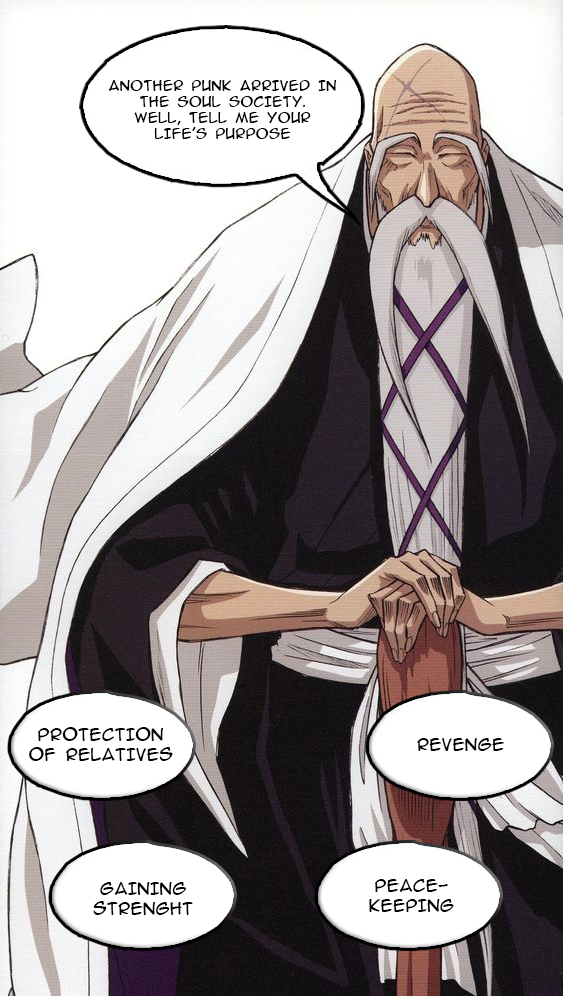
<style>
.page{position:relative;width:567px;height:997px;background:#ffffff}
.page>*{position:absolute;margin:0}
.t1{font:13.3px "AnimeAcev05";color:#000000}
.t2{font:16px "AnimeAcev05";color:#000000}
.t3{font:12px "AnimeAcev05";color:#000000}
</style>
<div class="page">
<p class="t1" style="left:108px;top:80px;width:229px;height:59px;text-align:center">another punk arrived in<br>the soul society.<br>well, tell me your<br>life’s purpose</p>
<p class="t2" style="left:29px;top:727px;width:144px;height:34px;text-align:center">protection<br>of relatives</p>
<p class="t3" style="left:417px;top:738px;width:87px;height:13px">revenge</p>
<p class="t3" style="left:369px;top:879px;width:85px;height:33px;text-align:center">peace-<br>keeping</p>
<p class="t3" style="left:93px;top:882px;width:100px;height:33px;text-align:center">gaining<br>strenght</p>
</div>
